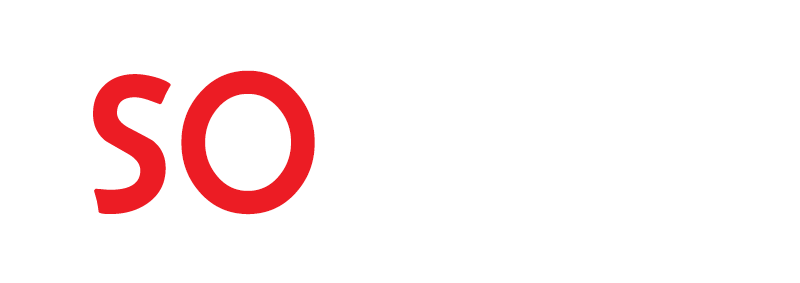
<style>
.page{position:relative;width:800px;height:283px;background:#ffffff}
.page>*{position:absolute;margin:0}
.t1{font:200px "BerlinSansFB-Reg";color:#ec1c24}
</style>
<div class="page">
<p class="t1" style="left:93px;top:74px;width:78px;height:140px">S</p>
<p class="t1" style="left:181px;top:70px;width:134px;height:145px">O</p>
</div>
